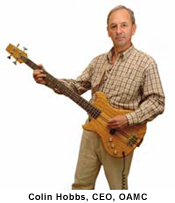
<style>
.page{position:relative;width:175px;height:203px;background:#fefefe}
.page>*{position:absolute;margin:0}
.t1{font:9px "Arial-BoldMT";letter-spacing:0.05em;color:#000000}
</style>
<div class="page">
<p class="t1" style="left:28px;top:193px;width:119px;height:9px">Colin Hobbs, CEO, OAMC</p>
</div>
